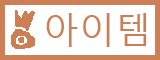
<style>
.page{position:relative;width:160px;height:60px;background:#ffffff}
.page>*{position:absolute;margin:0}
.t1{font:36px "MalgunGothicRegular";color:#cd7e55}
</style>
<div class="page">
<p class="t1" style="left:46px;top:13px;width:100px;height:34px">아이템</p>
</div>
